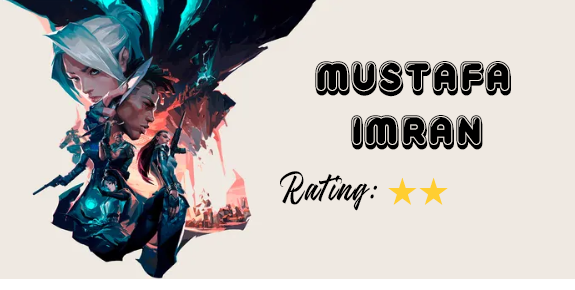
<style>
.page{position:relative;width:575px;height:290px;background:#efe9e2}
.page>*{position:absolute;margin:0}
.t1{font:48.4px/10.6px "Reglisse";letter-spacing:0.05em;color:#000000}
.t2{font:42px "BotheringScriptPERSONALUSE-Regular";letter-spacing:0.05em;color:#000000}
</style>
<div class="page">
<p class="t1" style="left:315px;top:60px;width:196px;height:90px;text-align:center">Mustafa <br><br><br><br><br>Imran</p>
<p class="t2" style="left:280px;top:171px;width:97px;height:40px">Rating:</p>
</div>
